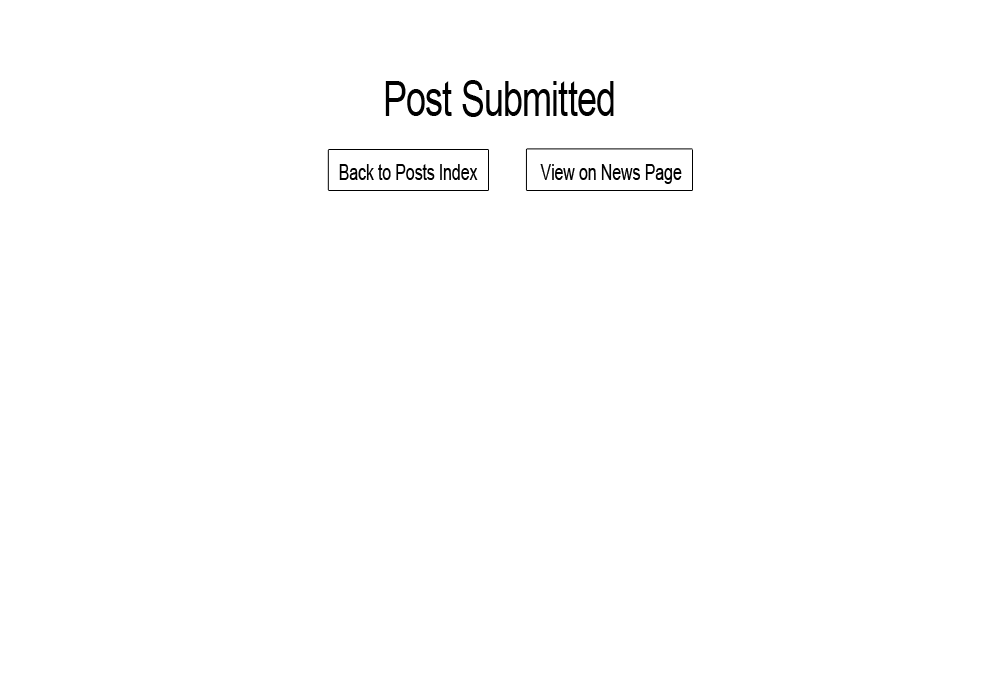
<style>
.page{position:relative;width:1000px;height:700px;background:#ffffff}
.page>*{position:absolute;margin:0}
.t1{font:48.7px "ArialMT";letter-spacing:-0.02em;color:#000000;scale:0.73 1}
.t2{font:22.3px "ArialMT";letter-spacing:-0.02em;color:#000000;scale:0.73 1}
</style>
<div class="page">
<p class="t1" style="left:385px;top:80px;width:229px;height:37px">Post Submitted</p>
<p class="t2" style="left:339px;top:164px;width:139px;height:16px">Back to Posts Index</p>
<p class="t2" style="left:540px;top:164px;width:142px;height:20px">View on News Page</p>
</div>
